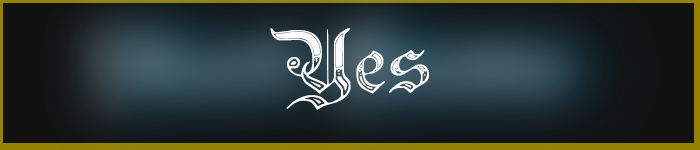
<style>
.page{position:relative;width:700px;height:150px}
.page>*{position:absolute;margin:0}
.t1{font:72px "TeutonicNo4-DemiBold";color:#ffffff}
</style>
<div class="page">
<p class="t1" style="left:270px;top:28px;width:159px;height:82px">Yes</p>
</div>
